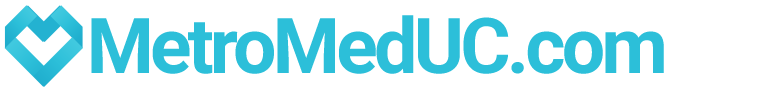
<style>
.page{position:relative;width:770px;height:92px;background:#ffffff}
.page>*{position:absolute;margin:0}
.t1{font:77px "Roboto-Bold";letter-spacing:-0.05em;color:#2cbfd9}
</style>
<div class="page">
<p class="t1" style="left:91px;top:15px;width:573px;height:59px">MetroMedUC.com</p>
</div>
